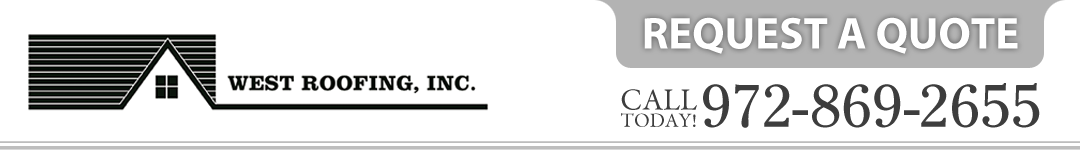
<style>
.page{position:relative;width:1080px;height:150px;background:#ffffff}
.page>*{position:absolute;margin:0}
.t1{font:44.9px "MyriadPro-Bold";color:#ffffff}
.t2{font:20.1px/17.2px "GaramondPremrPro";color:#3d3d3d}
.t3{font:30.6px/17.2px "MyriadPro-Regular";color:#323030}
.t4{font:30.6px/17.2px "GaramondPremrPro";color:#3d3d3d}
.t5{font:59.4px "Cheltenham-Book";color:#3d3d3d}
.t6{font:59.4px "Cheltenham-Book";letter-spacing:-0.02em;color:#3d3d3d}
.t7{font:59.4px "Cheltenham-Book";letter-spacing:0.04em;color:#3d3d3d}
.t8{font:59.4px "Cheltenham-Book";letter-spacing:0.02em;color:#3d3d3d}
</style>
<div class="page">
<p class="t1" style="left:644px;top:17px;width:374px;height:37px">REQUEST A QUOTE</p>
<p class="t2" style="left:621px;top:89px;width:76px;height:38px;text-align:center"><span class="t3"><br></span><span class="t4">CALL<br></span>TODAY!</p>
<p class="t5" style="left:703px;top:83px;width:337px;height:45px"><span class="t6">9</span>72<span class="t7">-</span>86<span class="t8">9</span><span class="t6">-</span>2655</p>
</div>
